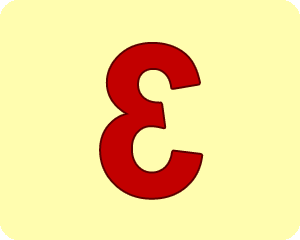
<style>
.page{position:relative;width:300px;height:240px;background:#fffdaf}
.page>*{position:absolute;margin:0}
.t1{font:210px "Arial-BoldMT";color:#c20000}
</style>
<div class="page">
<p class="t1" style="left:101px;top:44px;width:101px;height:154px;rotate:180deg">3</p>
</div>
